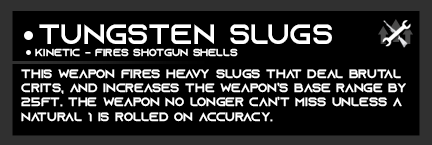
<style>
.page{position:relative;width:432px;height:145px;background:#000000}
.page>*{position:absolute;margin:0}
.t1{font:28px "AzonixRegular";color:#ffffff}
.t2{font:10px "AzonixRegular";color:#ffffff}
.t3{font:12px "AzonixRegular";color:#ffffff}
</style>
<div class="page">
<p class="t1" style="left:39px;top:24px;width:293px;height:20px">tungsten slugs</p>
<p class="t2" style="left:35px;top:48px;width:203px;height:9px">kinetic - fires shotgun shells</p>
<p class="t3" style="left:21px;top:69px;width:385px;height:53px">this weapon fires heavy slugs that deal brutal<br>crits, and increases the weapon’s base range by<br>25ft. the weapon no longer can’t miss unless a<br>natural 1 is rolled on accuracy.</p>
</div>
